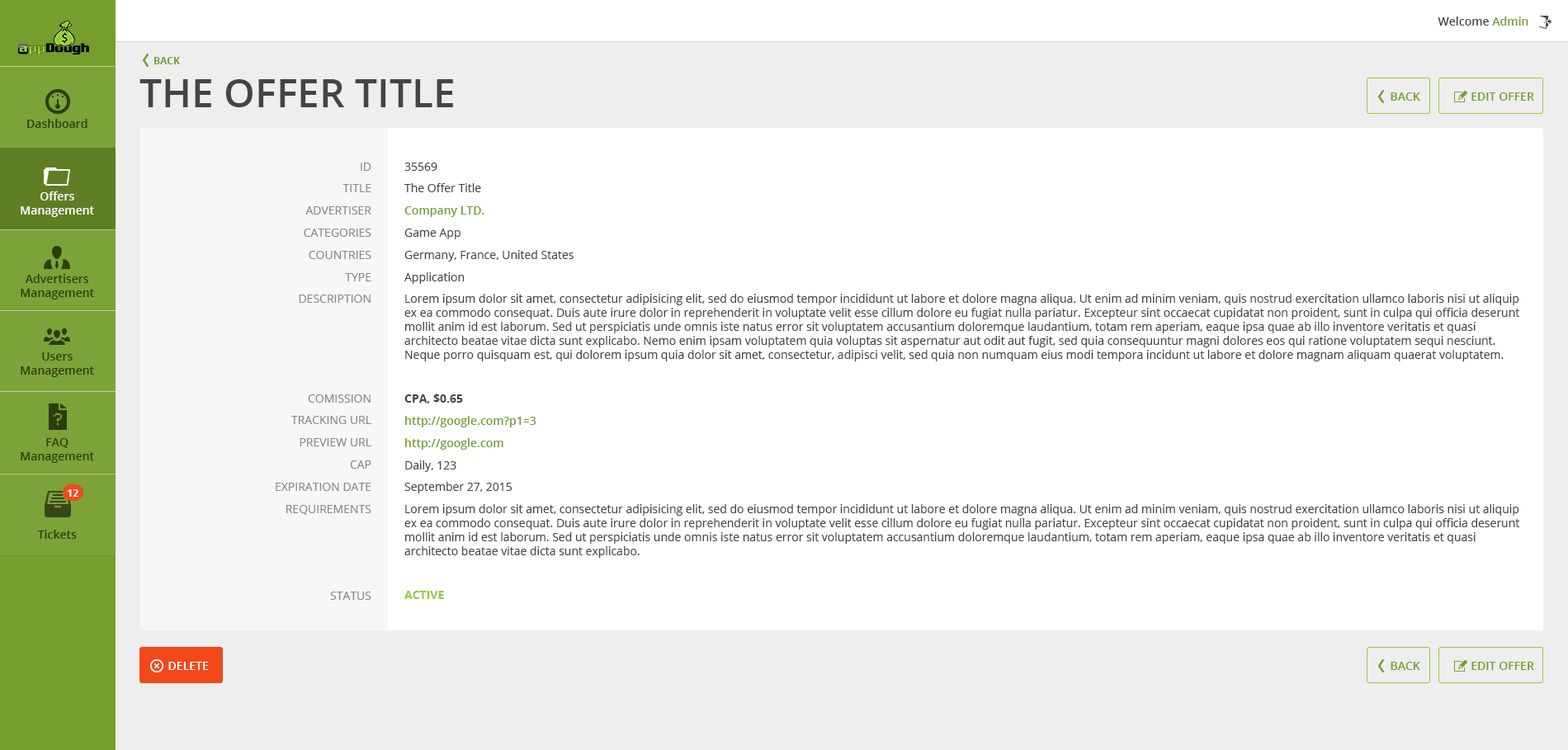
<style>
.page{position:relative;width:1568px;height:750px;background:#ffffff}
.page>*{position:absolute;margin:0}
.t1{font:11.6px "OpenSans-Semibold";color:#444444}
.t2{font:11.6px "OpenSans-Semibold";color:#759e2d}
.t3{font:9.9px "OpenSans-Bold";color:#759e2d;text-transform:uppercase}
.t4{font:39.6px "OpenSans-Semibold";color:#444444;text-transform:uppercase}
.t5{font:11.6px "OpenSans-Semibold";color:#759e2d;text-transform:uppercase}
.t6{font:11.6px "OpenSans-Semibold";color:#2d3d0f}
.t7{font:11.6px "OpenSans";color:#888888;text-transform:uppercase}
.t8{font:11.6px "OpenSans";color:#444444}
.t9{font:11.6px "OpenSans-Bold";color:#444444}
.t10{font:11.6px "OpenSans-Bold";color:#96c93d}
.t11{font:11.6px "OpenSans-Semibold";color:#ffffff}
.t12{font:9.9px "OpenSans-Bold";color:#ffffff}
.t13{font:11.6px "OpenSans-Semibold";color:#ffffff;text-transform:uppercase}
</style>
<div class="page">
<p class="t1" style="left:1438px;top:17px;width:90px;height:9px">Welcome <span class="t2">Admin</span></p>
<p class="t3" style="left:154px;top:57px;width:26px;height:7px">Back</p>
<p class="t4" style="left:139px;top:79px;width:314px;height:28px">The Offer Title</p>
<p class="t5" style="left:1391px;top:92px;width:29px;height:9px">Back</p>
<p class="t5" style="left:1471px;top:92px;width:63px;height:9px">Edit Offer</p>
<p class="t6" style="left:27px;top:119px;width:60px;height:9px">Dashboard</p>
<p class="t7" style="left:299px;top:163px;width:72px;height:140px;text-align:right">ID<br>Title<br>Advertiser<br>Categories<br>Countries<br>Type<br>Description</p>
<p class="t8" style="left:404px;top:163px;width:1115px;height:436px">35569<br>The Offer Title<br><span class="t2">Company LTD.<br></span>Game App<br>Germany, France, United States<br>Application<br>Lorem ipsum dolor sit amet, consectetur adipisicing elit, sed do eiusmod tempor incididunt ut labore et dolore magna aliqua. Ut enim ad minim veniam, quis nostrud exercitation ullamco laboris nisi ut aliquip ex ea commodo consequat. Duis aute irure dolor in reprehenderit in voluptate velit esse cillum dolore eu fugiat nulla pariatur. Excepteur sint occaecat cupidatat non proident, sunt in culpa qui officia deserunt mollit anim id est laborum. Sed ut perspiciatis unde omnis iste natus error sit voluptatem accusantium doloremque laudantium, totam rem aperiam, eaque ipsa quae ab illo inventore veritatis et quasi architecto beatae vitae dicta sunt explicabo. Nemo enim ipsam voluptatem quia voluptas sit aspernatur aut odit aut fugit, sed quia consequuntur magni dolores eos qui ratione voluptatem sequi nesciunt. Neque porro quisquam est, qui dolorem ipsum quia dolor sit amet, consectetur, adipisci velit, sed quia non numquam eius modi tempora incidunt ut labore et dolore magnam aliquam quaerat voluptatem.<br><br><span class="t9">CPA, $0.65<br></span><span class="t2">http://google.com?p1=3<br>http://google.com<br></span>Daily, 123<br>September 27, 2015<br>Lorem ipsum dolor sit amet, consectetur adipisicing elit, sed do eiusmod tempor incididunt ut labore et dolore magna aliqua. Ut enim ad minim veniam, quis nostrud exercitation ullamco laboris nisi ut aliquip ex ea commodo consequat. Duis aute irure dolor in reprehenderit in voluptate velit esse cillum dolore eu fugiat nulla pariatur. Excepteur sint occaecat cupidatat non proident, sunt in culpa qui officia deserunt mollit anim id est laborum. Sed ut perspiciatis unde omnis iste natus error sit voluptatem accusantium doloremque laudantium, totam rem aperiam, eaque ipsa quae ab illo inventore veritatis et quasi architecto beatae vitae dicta sunt explicabo. <br><br><span class="t10">ACTIVE</span></p>
<p class="t11" style="left:21px;top:191px;width:73px;height:26px;text-align:center">Offers Management</p>
<p class="t6" style="left:21px;top:274px;width:73px;height:26px;text-align:center">Advertisers Management</p>
<p class="t6" style="left:21px;top:352px;width:73px;height:25px;text-align:center">Users Management</p>
<p class="t7" style="left:276px;top:394px;width:95px;height:121px;text-align:right">comission<br>Tracking URL<br>Preview URL<br>CAP<br>Expiration Date<br>Requirements</p>
<p class="t6" style="left:21px;top:438px;width:73px;height:25px;text-align:center">FAQ Management</p>
<p class="t12" style="left:68px;top:489px;width:10px;height:8px">12</p>
<p class="t6" style="left:37px;top:530px;width:40px;height:9px">Tickets</p>
<p class="t7" style="left:330px;top:592px;width:41px;height:8px">Status</p>
<p class="t13" style="left:168px;top:662px;width:41px;height:8px">Delete</p>
<p class="t5" style="left:1391px;top:662px;width:29px;height:8px">Back</p>
<p class="t5" style="left:1471px;top:662px;width:63px;height:8px">Edit Offer</p>
</div>
